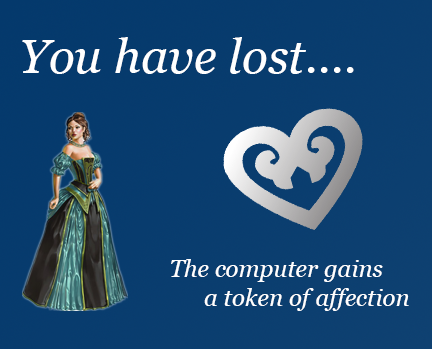
<style>
.page{position:relative;width:432px;height:349px}
.page>*{position:absolute;margin:0}
.t1{font:48px "Georgia-Italic";color:#ffffff}
.t2{font:24px "Georgia-Italic";color:#ffffff}
</style>
<div class="page">
<p class="t1" style="left:22px;top:37px;width:332px;height:37px">You have lost....</p>
<p class="t2" style="left:171px;top:259px;width:238px;height:52px">The computer gains <br>         a token of affection</p>
</div>
